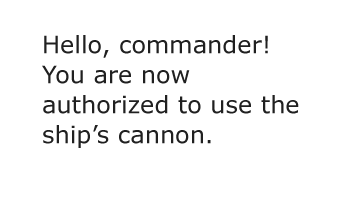
<style>
.page{position:relative;width:340px;height:222px;background:#ffffff}
.page>*{position:absolute;margin:0}
.t1{font:24px/30px "Verdana";color:#202020}
</style>
<div class="page">
<p class="t1" style="left:42px;top:35px;width:257px;height:113px">Hello, commander! You are now<br>authorized to use the ship’s cannon.</p>
</div>
